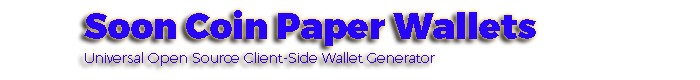
<style>
.page{position:relative;width:700px;height:80px;background:#ffffff}
.page>*{position:absolute;margin:0}
.t1{font:14px "Montserrat-UltraLight";color:#2705f9}
.t2{font:36px "Montserrat-Black";color:#2705f9}
</style>
<div class="page">
<p class="t1" style="left:84px;top:10px;width:452px;height:56px"><span class="t2">Soon Coin Paper Wallets<br><br></span>Universal Open Source Client-Side Wallet Generator</p>
</div>
